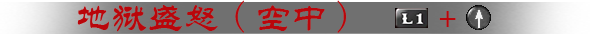
<style>
.page{position:relative;width:590px;height:34px;background:#707070}
.page>*{position:absolute;margin:0}
.t1{font:36px "STLiti";color:#ba060b}
.t2{font:36px "FangSong";color:#ba060b}
</style>
<div class="page">
<p class="t1" style="left:77px;top:0px;width:379px;height:33px">地狱盛怒<span class="t2">(</span>空中<span class="t2">)</span>   +</p>
</div>
